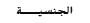
<style>
.page{position:relative;width:90px;height:23px;background:#ffffff}
.page>*{position:absolute;margin:0}
.t1{font:12px "BoutrosAdsMedium";color:#0c0b0b}
</style>
<div class="page">
<p class="t1" style="left:16px;top:6px;width:57px;height:11px">الجنسيــة</p>
</div>
